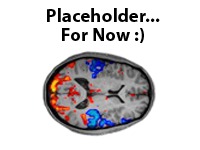
<style>
.page{position:relative;width:200px;height:150px;background:#ffffff}
.page>*{position:absolute;margin:0}
.t1{font:18.7px/18.7px "MyriadPro-Bold";letter-spacing:0.01em;color:#000000}
</style>
<div class="page">
<p class="t1" style="left:47px;top:8px;width:113px;height:35px;text-align:center">Placeholder...<br>For Now :)</p>
</div>
